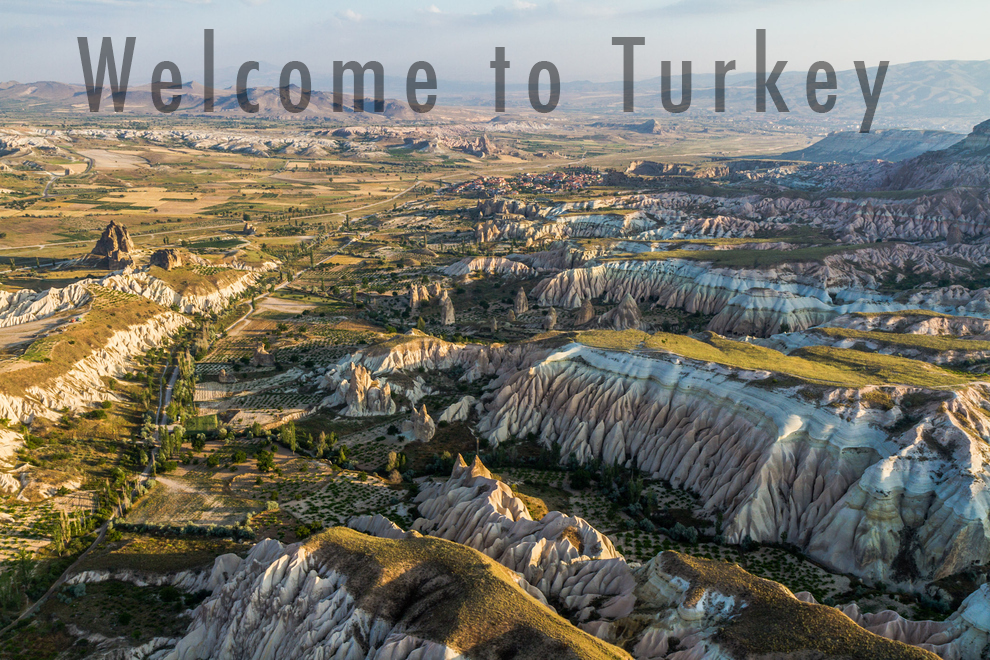
<style>
.page{position:relative;width:990px;height:660px}
.page>*{position:absolute;margin:0}
.t1{font:100px "Futura-CondensedMedium";letter-spacing:0.14em;color:#64686f}
</style>
<div class="page">
<p class="t1" style="left:77px;top:29px;width:813px;height:104px">Welcome to Turkey</p>
</div>
